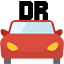
<style>
.page{position:relative;width:64px;height:64px;background:#ffffff}
.page>*{position:absolute;margin:0}
.t1{font:26px "BNMachine";color:#000000;scale:1.06 1}
</style>
<div class="page">
<p class="t1" style="left:19px;top:1px;width:29px;height:19px">DR</p>
</div>
